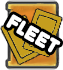
<style>
.page{position:relative;width:63px;height:70px;background:#ffffff}
.page>*{position:absolute;margin:0}
.t1{font:24px "Junegull";color:#ffffff}
</style>
<div class="page">
<p class="t1" style="left:6px;top:14px;width:55px;height:39px;rotate:30deg">FLEET</p>
</div>
